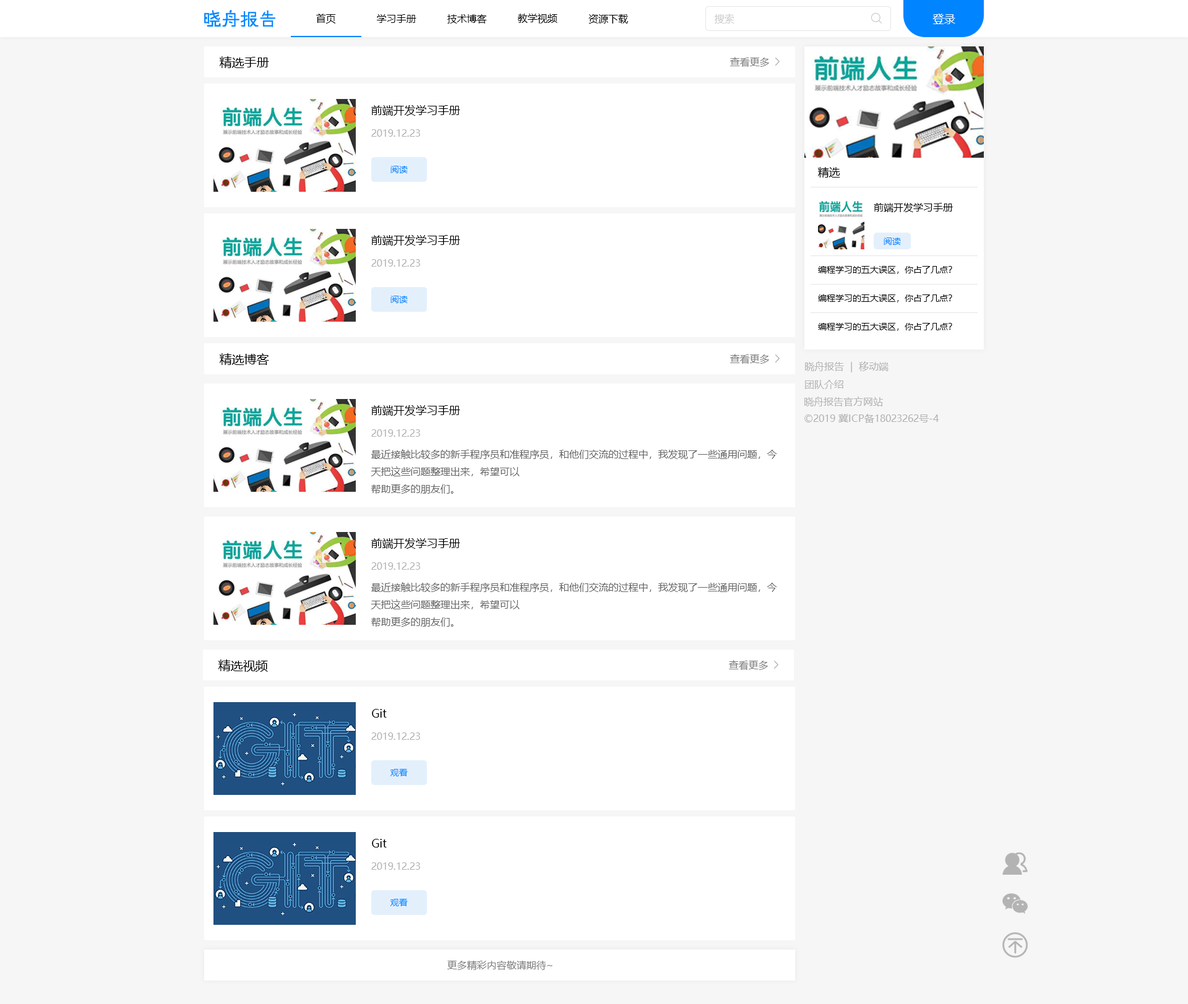
<style>
.page{position:relative;width:1188px;height:1004px;background:#f6f6f6}
.page>*{position:absolute;margin:0}
.t1{font:9.9px "MicrosoftYaHei";color:#000000}
.t2{font:9.9px "MicrosoftYaHei";color:#cccccc}
.t3{font:11.1px "MicrosoftYaHei";color:#ffffff}
.t4{font:12.4px "MicrosoftYaHei";color:#000000}
.t5{font:9.9px "MicrosoftYaHei";color:#808080}
.t6{font:11.1px "MicrosoftYaHei";color:#000000}
.t7{font:9.9px "MicrosoftYaHei";color:#b3b3b3}
.t8{font:8.7px "MicrosoftYaHei";color:#0084ff}
.t9{font:8.7px "MicrosoftYaHei";color:#000000}
.t10{font:9.9px "MicrosoftYaHei";color:#666666}
</style>
<div class="page">
<p class="t1" style="left:316px;top:14px;width:20px;height:10px">首页</p>
<p class="t1" style="left:377px;top:14px;width:39px;height:9px">学习手册</p>
<p class="t1" style="left:447px;top:14px;width:40px;height:10px">技术博客</p>
<p class="t1" style="left:518px;top:14px;width:39px;height:10px">教学视频</p>
<p class="t1" style="left:588px;top:14px;width:40px;height:10px">资源下载</p>
<p class="t2" style="left:714px;top:14px;width:20px;height:10px">搜索</p>
<p class="t3" style="left:932px;top:14px;width:23px;height:10px">登录</p>
<p class="t4" style="left:220px;top:56px;width:49px;height:12px">精选手册</p>
<p class="t5" style="left:730px;top:57px;width:39px;height:10px">查看更多</p>
<p class="t6" style="left:371px;top:105px;width:89px;height:11px">前端开发学习手册</p>
<p class="t7" style="left:371px;top:129px;width:49px;height:8px">2019.12.23</p>
<p class="t8" style="left:390px;top:166px;width:18px;height:7px">阅读</p>
<p class="t6" style="left:818px;top:167px;width:22px;height:11px">精选</p>
<p class="t1" style="left:873px;top:203px;width:80px;height:9px">前端开发学习手册</p>
<p class="t6" style="left:371px;top:235px;width:89px;height:11px">前端开发学习手册</p>
<p class="t8" style="left:883px;top:238px;width:18px;height:7px">阅读</p>
<p class="t7" style="left:371px;top:259px;width:49px;height:8px">2019.12.23</p>
<p class="t9" style="left:818px;top:266px;width:134px;height:8px">编程学习的五大误区，你占了几点？</p>
<p class="t8" style="left:390px;top:296px;width:18px;height:7px">阅读</p>
<p class="t9" style="left:818px;top:294px;width:134px;height:8px">编程学习的五大误区，你占了几点？</p>
<p class="t9" style="left:818px;top:323px;width:134px;height:8px">编程学习的五大误区，你占了几点？</p>
<p class="t4" style="left:220px;top:353px;width:49px;height:12px">精选博客</p>
<p class="t5" style="left:730px;top:354px;width:39px;height:10px">查看更多</p>
<p class="t7" style="left:805px;top:361px;width:83px;height:11px">晓舟报告  |  移动端</p>
<p class="t7" style="left:805px;top:380px;width:38px;height:9px">团队介绍</p>
<p class="t7" style="left:804px;top:397px;width:79px;height:9px">晓舟报告官方网站</p>
<p class="t6" style="left:371px;top:405px;width:89px;height:11px">前端开发学习手册</p>
<p class="t7" style="left:804px;top:414px;width:135px;height:9px">©2019 冀ICP备18023262号-4</p>
<p class="t7" style="left:371px;top:429px;width:49px;height:8px">2019.12.23</p>
<p class="t10" style="left:371px;top:449px;width:406px;height:45px">最近接触比较多的新手程序员和准程序员，和他们交流的过程中，我发现了一些通用问题，今<br>天把这些问题整理出来，希望可以<br>帮助更多的朋友们。</p>
<p class="t6" style="left:371px;top:538px;width:89px;height:11px">前端开发学习手册</p>
<p class="t7" style="left:371px;top:562px;width:49px;height:8px">2019.12.23</p>
<p class="t10" style="left:371px;top:582px;width:406px;height:45px">最近接触比较多的新手程序员和准程序员，和他们交流的过程中，我发现了一些通用问题，今<br>天把这些问题整理出来，希望可以<br>帮助更多的朋友们。</p>
<p class="t4" style="left:218px;top:659px;width:50px;height:13px">精选视频</p>
<p class="t5" style="left:729px;top:660px;width:39px;height:10px">查看更多</p>
<p class="t6" style="left:372px;top:709px;width:15px;height:9px">Git</p>
<p class="t7" style="left:371px;top:732px;width:49px;height:8px">2019.12.23</p>
<p class="t8" style="left:390px;top:769px;width:18px;height:7px">观看</p>
<p class="t6" style="left:372px;top:839px;width:15px;height:8px">Git</p>
<p class="t7" style="left:371px;top:862px;width:49px;height:8px">2019.12.23</p>
<p class="t8" style="left:390px;top:899px;width:18px;height:7px">观看</p>
<p class="t5" style="left:447px;top:961px;width:105px;height:9px">更多精彩内容敬请期待~</p>
</div>
